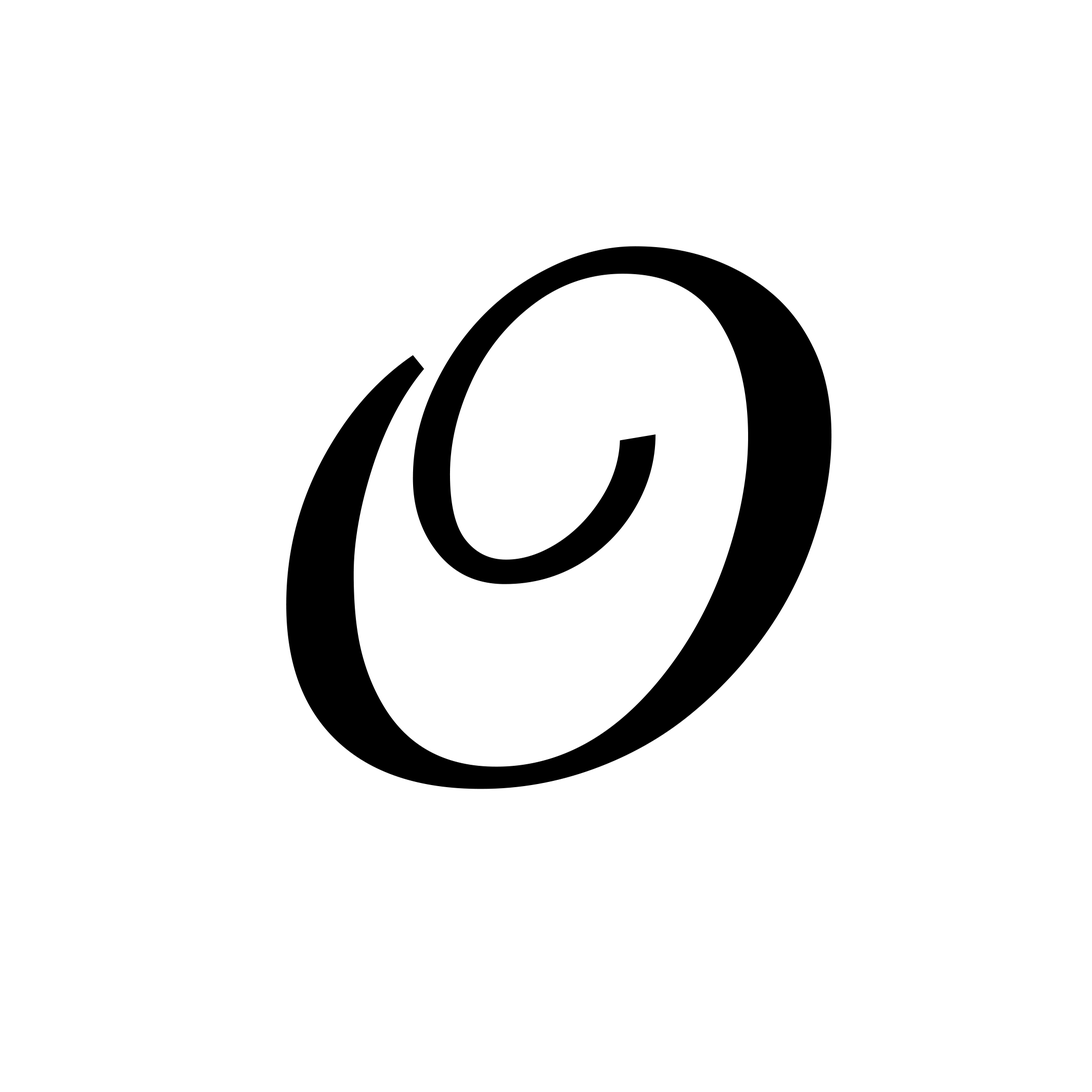
<style>
.page{position:relative;width:1092px;height:1092px;background:#ffffff}
.page>*{position:absolute;margin:0}
.t1{font:758.7px "Niconne-Regular";color:#000000}
</style>
<div class="page">
<p class="t1" style="left:286px;top:246px;width:546px;height:543px">O</p>
</div>
